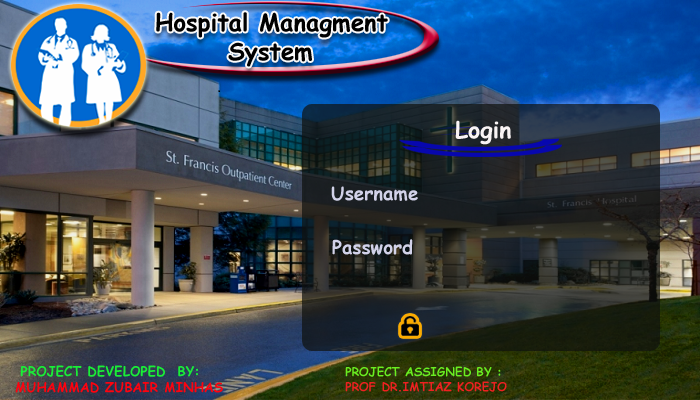
<style>
.page{position:relative;width:700px;height:400px}
.page>*{position:absolute;margin:0}
.t1{font:24px "ComicSansMS-Bold";color:#000000}
.t2{font:22.7px "ComicSansMS-Bold";color:#f9f4f5;scale:1.03 1}
.t3{font:18.7px "ComicSansMS-Bold";color:#d2d2e9}
.t4{font:13.3px "ComicSansMS-Bold";color:#19ee37}
.t5{font:16px "ComicSansMS-Bold";color:#ff000c}
.t6{font:13.3px "ComicSansMS-Bold";color:#fd030f}
.t7{font:12px "ComicSansMS-Bold";color:#69ee21}
.t8{font:16px "ComicSansMS-Bold";color:#ee2121}
.t9{font:12px "ComicSansMS-Bold";color:#ee2121}
</style>
<div class="page">
<p class="t1" style="left:156px;top:12px;width:232px;height:55px">Hospital Managment<br>       System</p>
<p class="t2" style="left:455px;top:120px;width:56px;height:25px">Login</p>
<p class="t3" style="left:331px;top:186px;width:87px;height:15px">Username</p>
<p class="t3" style="left:332px;top:239px;width:81px;height:16px">Password</p>
<p class="t4" style="left:15px;top:365px;width:208px;height:28px"><span class="t5"> </span>  <br>  PROJECT DEVELOPED  BY:<br> <span class="t6">MUHAMMAD ZUBAIR MINHAS</span></p>
<p class="t7" style="left:345px;top:366px;width:162px;height:26px"><span class="t8"><br></span>PROJECT ASSIGNED BY :<br><span class="t9">PROF DR.IMTIAZ KOREJO</span></p>
</div>
